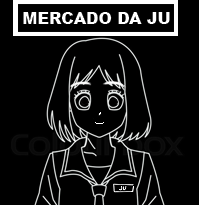
<style>
.page{position:relative;width:199px;height:205px;background:#000000}
.page>*{position:absolute;margin:0}
.t1{font:12px "Arial-Black";color:#ffffff}
</style>
<div class="page">
<p class="t1" style="left:23px;top:12px;width:147px;height:12px">MERCADO DA JU</p>
</div>
